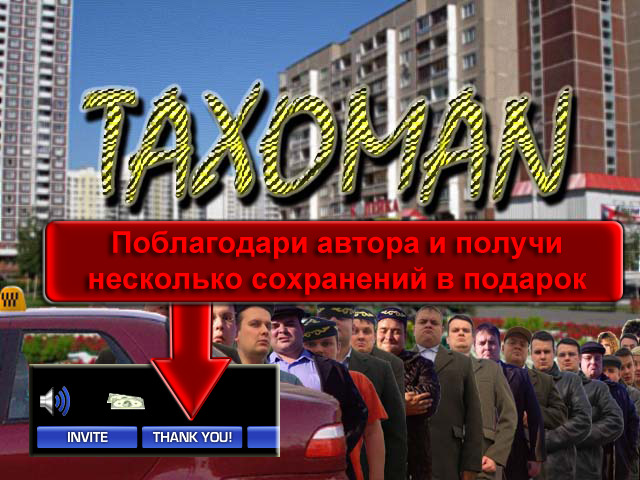
<style>
.page{position:relative;width:640px;height:480px}
.page>*{position:absolute;margin:0}
.t1{font:30px "Arial-BoldMT";color:#ff0000}
</style>
<div class="page">
<p class="t1" style="left:89px;top:230px;width:498px;height:65px;text-align:center">Поблагодари автора и получи     несколько сохранений в подарок</p>
</div>
